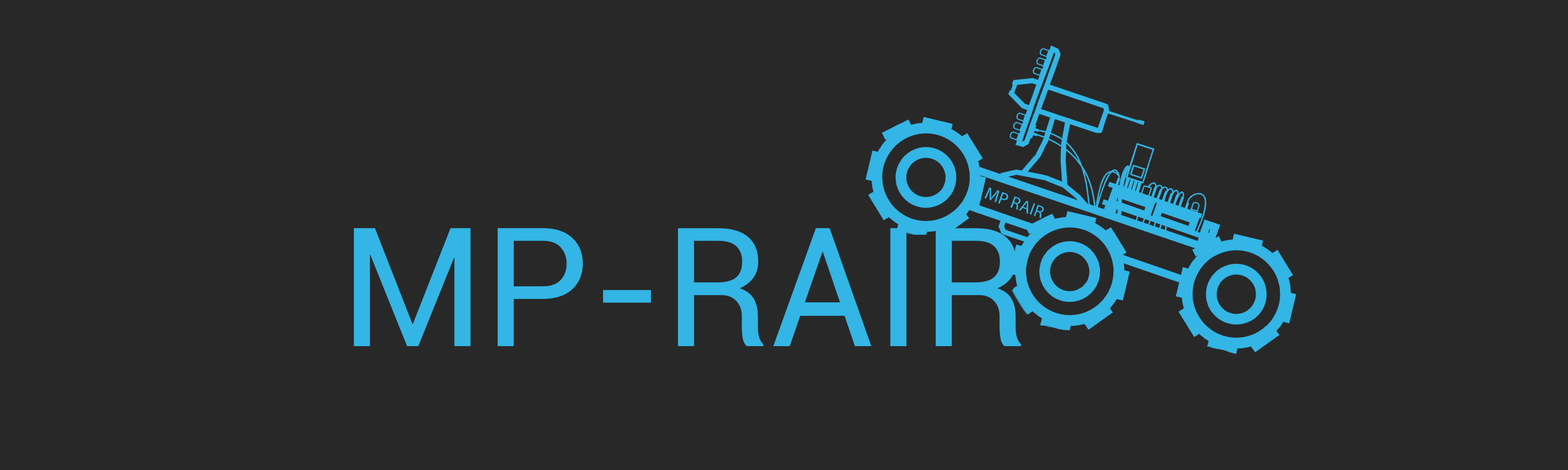
<style>
.page{position:relative;width:1568px;height:470px;background:#282828}
.page>*{position:absolute;margin:0}
.t1{font:165.9px "Roboto-Regular";color:#33b5e5}
</style>
<div class="page">
<p class="t1" style="left:353px;top:228px;width:668px;height:118px">MP-RAIR</p>
</div>
